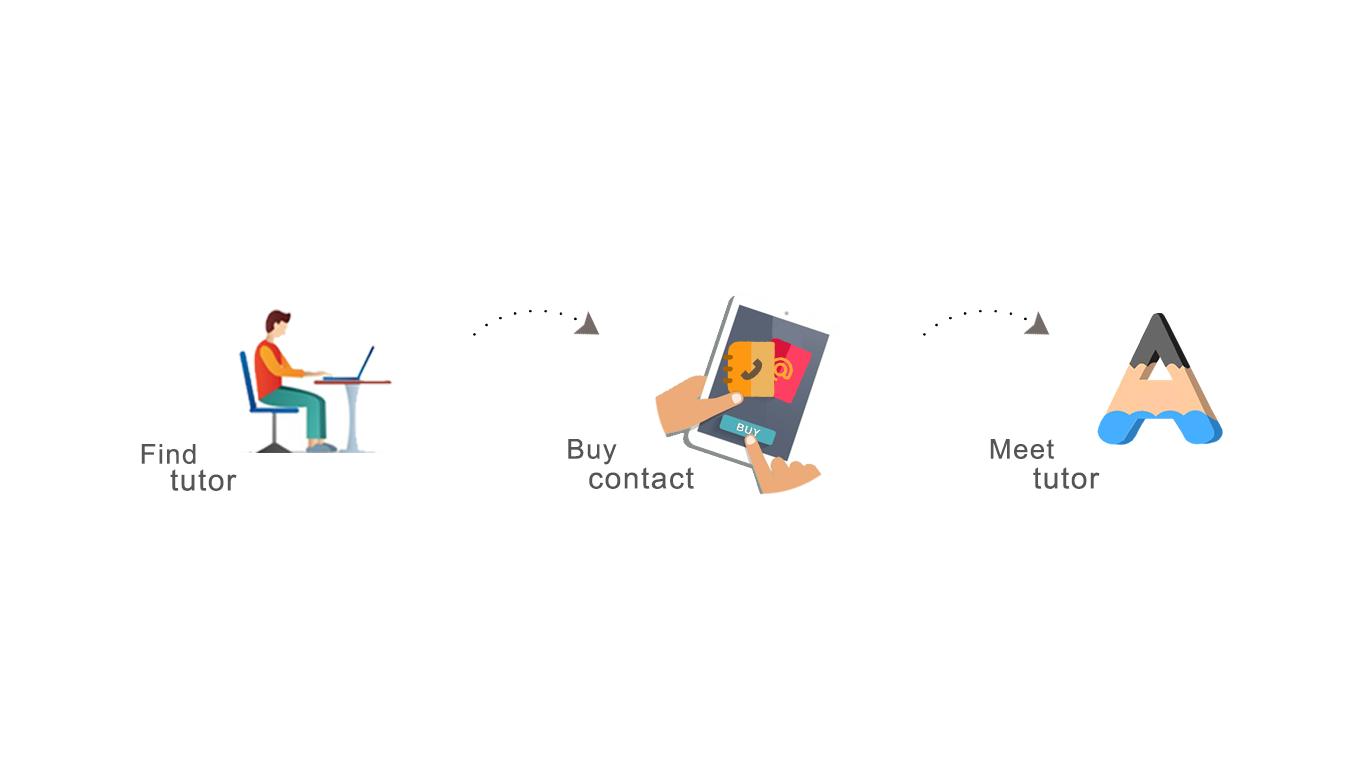
<style>
.page{position:relative;width:1366px;height:768px;background:#ffffff}
.page>*{position:absolute;margin:0}
.t1{font:27.3px "ArialMT";letter-spacing:0.05em;color:#555555}
.t2{font:30px "ArialMT";letter-spacing:0.05em;color:#555555}
</style>
<div class="page">
<p class="t1" style="left:141px;top:444px;width:55px;height:20px">Find</p>
<p class="t1" style="left:568px;top:439px;width:49px;height:26px">Buy</p>
<p class="t1" style="left:990px;top:439px;width:64px;height:20px">Meet</p>
<p class="t2" style="left:170px;top:469px;width:67px;height:22px">tutor</p>
<p class="t2" style="left:589px;top:467px;width:105px;height:22px">contact</p>
<p class="t2" style="left:1033px;top:467px;width:67px;height:22px">tutor</p>
</div>
